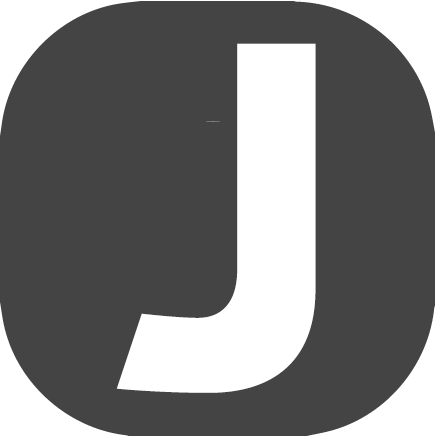
<style>
.page{position:relative;width:435px;height:436px;background:#444444}
.page>*{position:absolute;margin:0}
.t1{font:415px "SztyletBd";letter-spacing:0.024em;color:#ffffff}
</style>
<div class="page">
<p class="t1" style="left:116px;top:43px;width:200px;height:350px">J</p>
</div>
